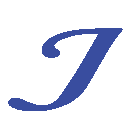
<style>
.page{position:relative;width:128px;height:128px;background:#ffffff}
.page>*{position:absolute;margin:0}
.t1{font:114px "STLiti";letter-spacing:0.06em;color:#394d9f;font-weight:bold;scale:2.02 1}
</style>
<div class="page">
<p class="t1" style="left:8px;top:28px;width:115px;height:83px">J</p>
</div>
